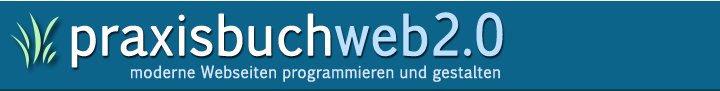
<style>
.page{position:relative;width:720px;height:91px;background:#0c648a}
.page>*{position:absolute;margin:0}
.t1{font:53.3px "Pigiarniq";letter-spacing:0.005em;color:#ffffff;font-weight:bold;scale:0.95 1}
.t2{font:53.3px "Pigiarniq";letter-spacing:0.005em;color:#bde0ff;font-weight:bold;scale:0.95 1}
.t3{font:16px "Pigiarniq";letter-spacing:0.005em;color:#d6e4fa;font-weight:bold;scale:0.95 1}
</style>
<div class="page">
<p class="t1" style="left:71px;top:12px;width:432px;height:56px">praxisbuch<span class="t2">web2.0</span></p>
<p class="t3" style="left:131px;top:65px;width:369px;height:17px">moderne Webseiten programmieren und gestalten</p>
</div>
